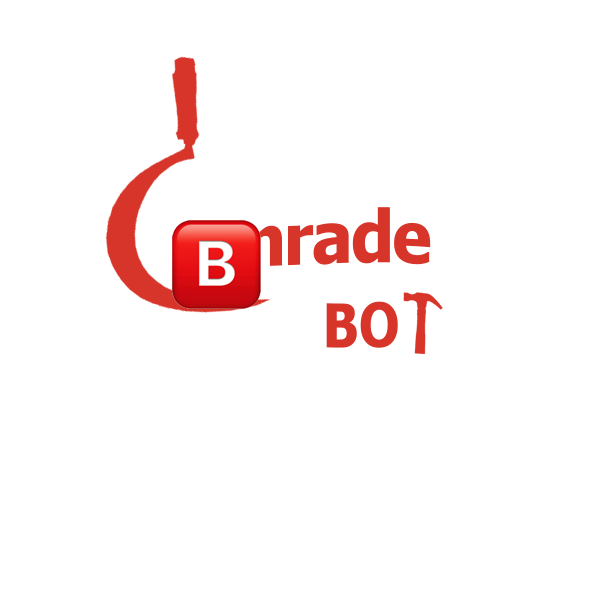
<style>
.page{position:relative;width:600px;height:600px;background:#ffffff}
.page>*{position:absolute;margin:0}
.t1{font:72px "Tahoma-Bold";letter-spacing:-0.005em;color:#d7342a;scale:0.95 1}
.t2{font:60px "Tahoma-Bold";letter-spacing:-0.005em;color:#d7342a;scale:0.88 1}
</style>
<div class="page">
<p class="t1" style="left:182px;top:207px;width:249px;height:60px">omrade</p>
<p class="t2" style="left:326px;top:301px;width:72px;height:47px">BO</p>
</div>
